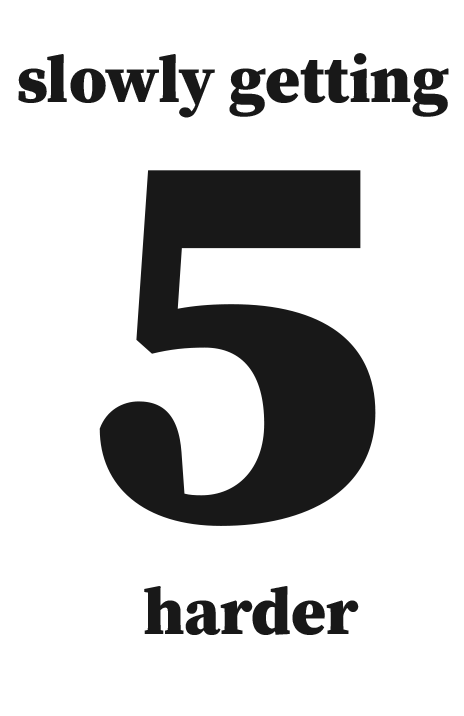
<style>
.page{position:relative;width:464px;height:716px;background:#ffffff}
.page>*{position:absolute;margin:0}
.t1{font:66.7px "SourceSerifRoman-Black";color:#181818}
.t2{font:555.6px "SourceSerifRoman-Black";color:#181818}
</style>
<div class="page">
<p class="t1" style="left:18px;top:53px;width:431px;height:65px">slowly getting</p>
<p class="t2" style="left:99px;top:170px;width:277px;height:356px">5</p>
<p class="t1" style="left:144px;top:586px;width:215px;height:49px">harder</p>
</div>
